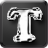
<style>
.page{position:relative;width:48px;height:48px}
.page>*{position:absolute;margin:0}
.t1{font:48px "CooperBlack";color:#ffffff}
</style>
<div class="page">
<p class="t1" style="left:8px;top:8px;width:34px;height:34px">T</p>
</div>
